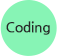
<style>
.page{position:relative;width:57px;height:56px;background:#87f4b5}
.page>*{position:absolute;margin:0}
.t1{font:14.3px "NanumGothicBold";letter-spacing:-0.035em;color:#282828}
</style>
<div class="page">
<p class="t1" style="left:6px;top:21px;width:44px;height:14px">Coding</p>
</div>
